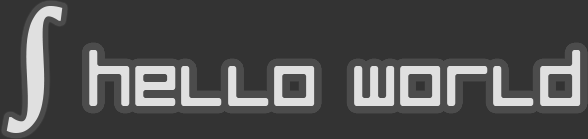
<style>
.page{position:relative;width:588px;height:139px;background:#333333}
.page>*{position:absolute;margin:0}
.t1{font:142px "SitkaDisplay-Bold";color:#e0e0e0}
.t2{font:72px "LuggageRound-Regular";color:#e0e0e0}
</style>
<div class="page">
<p class="t1" style="left:6px;top:6px;width:57px;height:127px">∫</p>
<p class="t2" style="left:89px;top:50px;width:492px;height:56px">hello world</p>
</div>
